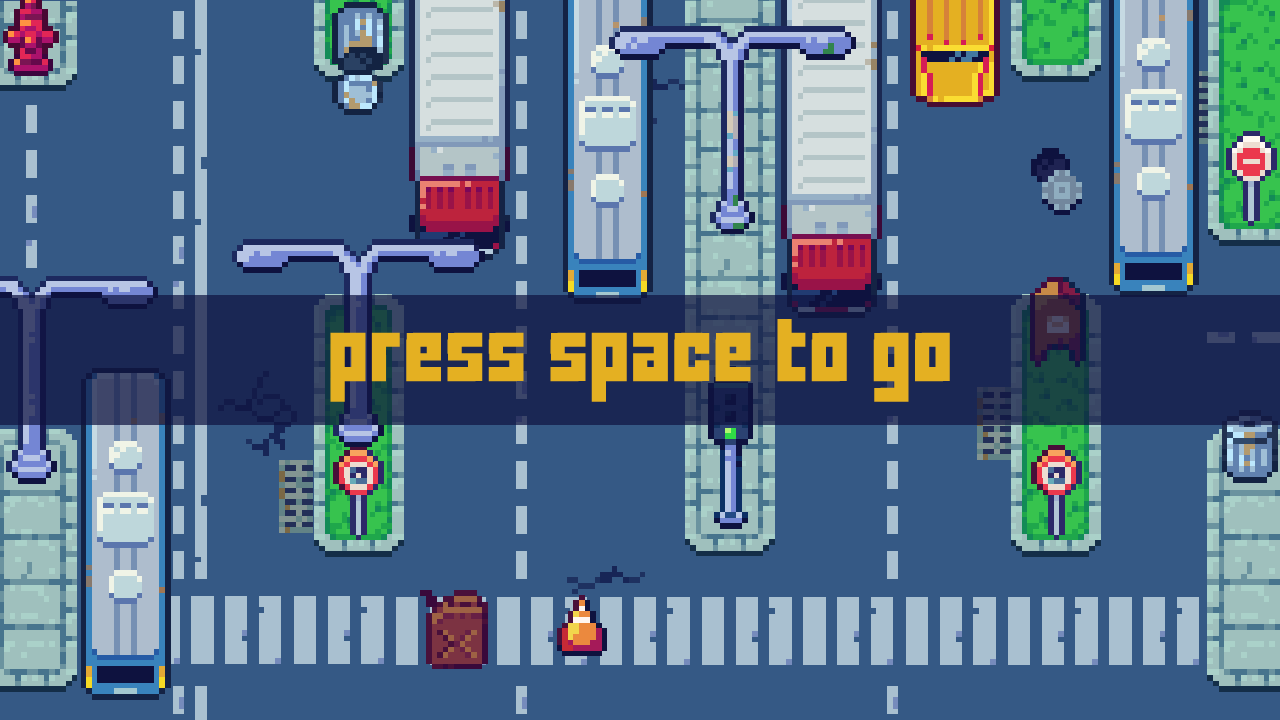
<style>
.page{position:relative;width:1280px;height:720px;background:#355985}
.page>*{position:absolute;margin:0}
.t1{font:55px "FFFForward";color:#e4b022}
</style>
<div class="page">
<p class="t1" style="left:330px;top:318px;width:620px;height:84px">press space to go</p>
</div>
